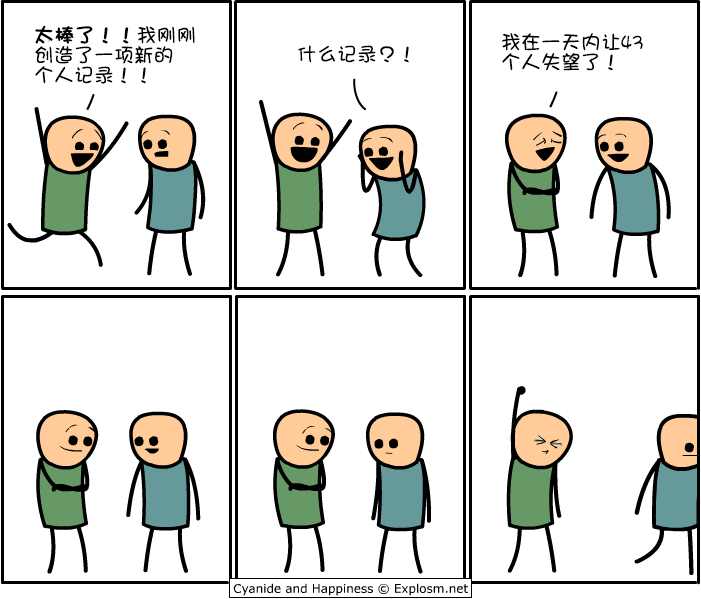
<style>
.page{position:relative;width:701px;height:599px;background:#ffffff}
.page>*{position:absolute;margin:0}
.t1{font:20px/20px "DFGirl";color:#000000}
.t2{font:20px/20px "DFGirl";color:#000000;font-weight:bold}
.t3{font:20px "DFGirl";color:#000000}
</style>
<div class="page">
<p class="t1" style="left:35px;top:25px;width:160px;height:59px"><span class="t2">太棒了！！</span>我刚刚<br>创造了一项新的<br>个人记录！！</p>
<p class="t1" style="left:501px;top:33px;width:142px;height:38px">我在一天内让43<br>个人失望了！</p>
<p class="t3" style="left:298px;top:45px;width:111px;height:18px">什么记录？！</p>
</div>
